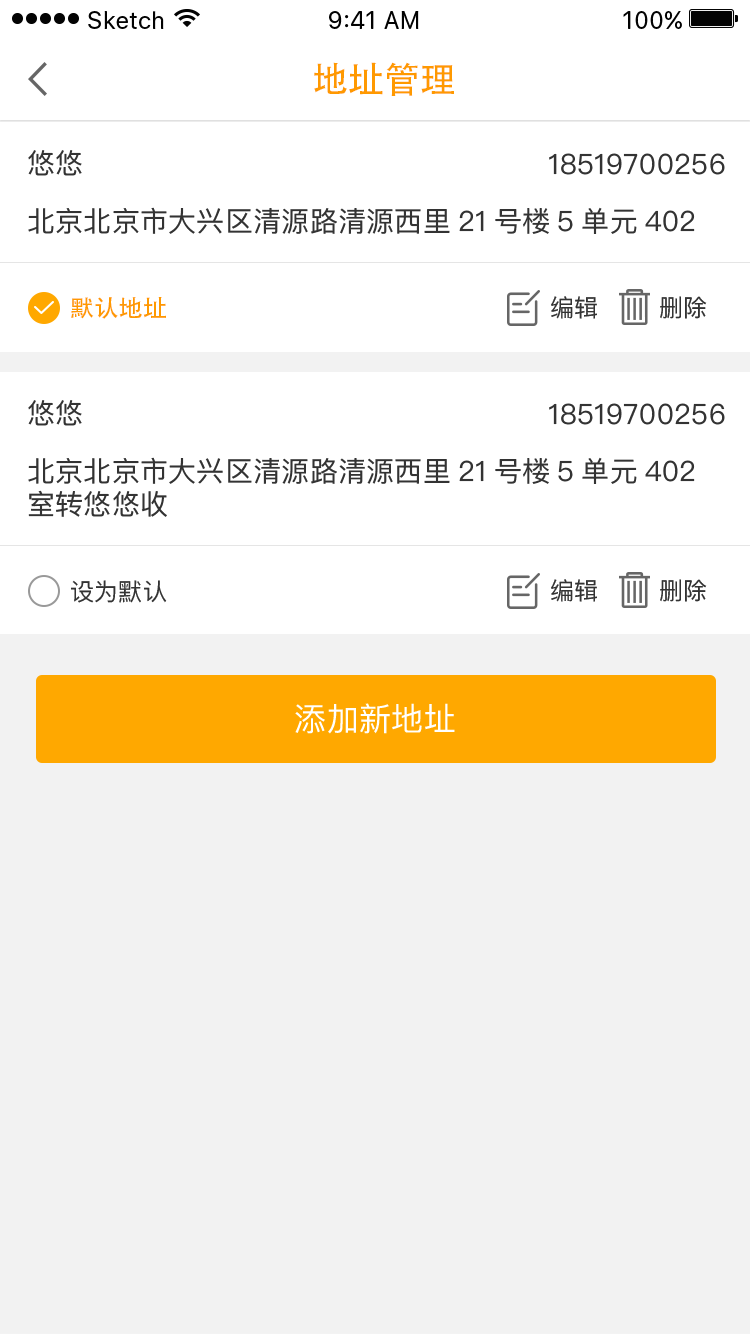
<style>
.page{position:relative;width:750px;height:1334px;background:#f2f2f2}
.page>*{position:absolute;margin:0}
.t1{font:36px "AdobeHeitiStd-Regular";color:#ff9900}
.t2{font:28px "PingFangSC-Regular";color:#333333}
.t3{font:28px "PingFangSC-Regular";letter-spacing:0.02em;color:#333333}
.t4{font:28px "PingFangSC-Regular";letter-spacing:0.01em;color:#333333}
.t5{font:24px "AdobeHeitiStd-Regular";letter-spacing:0.01em;color:#ff9900}
.t6{font:24px "PingFangSC-Regular";letter-spacing:0.01em;color:#333333}
.t7{font:28px/33px "PingFangSC-Regular";letter-spacing:0.01em;color:#333333}
.t8{font:32px "PingFangSC-Regular";letter-spacing:0.01em;color:#ffffff}
</style>
<div class="page">
<p class="t1" style="left:314px;top:62px;width:140px;height:34px">地址管理</p>
<p class="t2" style="left:28px;top:150px;width:54px;height:26px">悠悠</p>
<p class="t3" style="left:549px;top:153px;width:176px;height:22px">18519700256</p>
<p class="t4" style="left:28px;top:207px;width:667px;height:27px">北京北京市大兴区清源路清源西里21号楼5单元402</p>
<p class="t5" style="left:71px;top:297px;width:95px;height:22px">默认地址</p>
<p class="t6" style="left:551px;top:296px;width:46px;height:23px">编辑</p>
<p class="t6" style="left:660px;top:296px;width:47px;height:23px">删除</p>
<p class="t2" style="left:28px;top:400px;width:54px;height:26px">悠悠</p>
<p class="t3" style="left:549px;top:403px;width:176px;height:22px">18519700256</p>
<p class="t7" style="left:28px;top:457px;width:667px;height:60px">北京北京市大兴区清源路清源西里21号楼5单元402<br>室转悠悠收</p>
<p class="t6" style="left:71px;top:580px;width:96px;height:23px">设为默认</p>
<p class="t6" style="left:551px;top:579px;width:46px;height:23px">编辑</p>
<p class="t6" style="left:660px;top:579px;width:47px;height:23px">删除</p>
<p class="t8" style="left:295px;top:703px;width:160px;height:31px">添加新地址</p>
</div>
